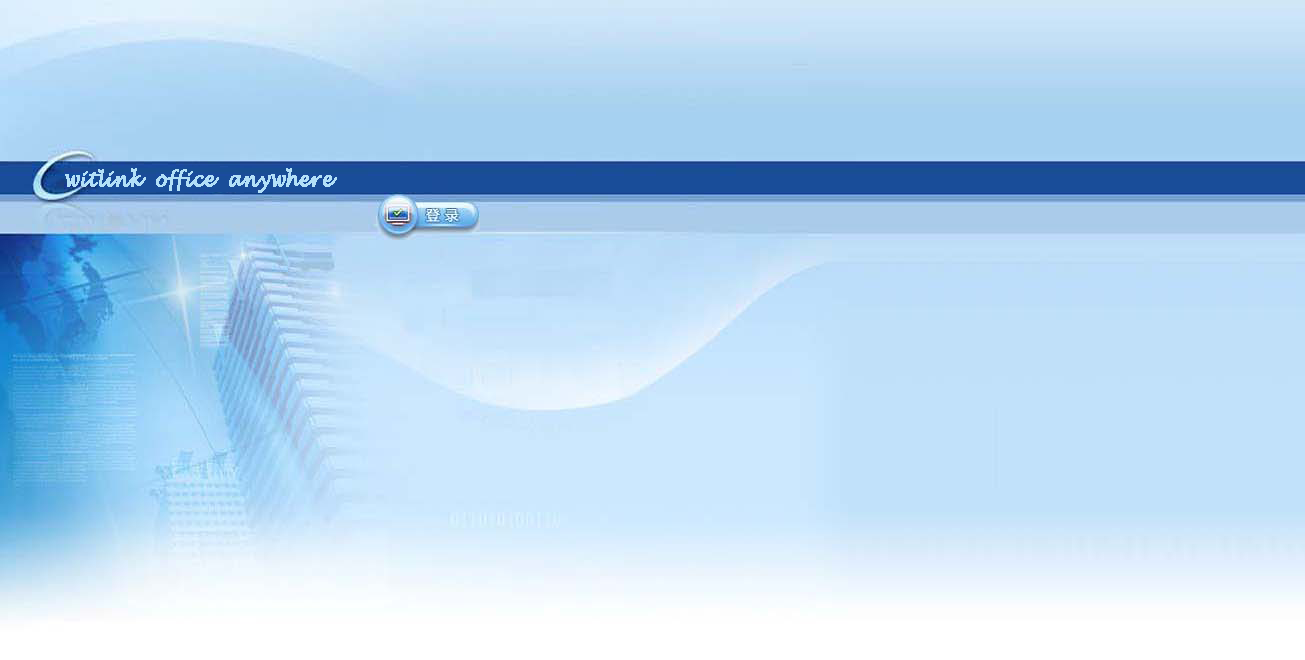
<style>
.page{position:relative;width:1305px;height:660px}
.page>*{position:absolute;margin:0}
.t1{font:20.3px "LucidaHandwriting-Italic";color:#b3e0f7;font-weight:bold;scale:0.87 1}
</style>
<div class="page">
<p class="t1" style="left:65px;top:168px;width:272px;height:25px">witlink  office  anywhere</p>
</div>
